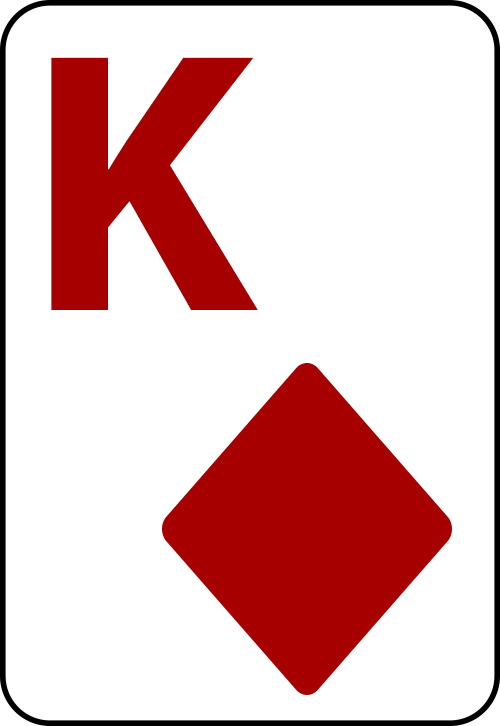
<style>
.page{position:relative;width:500px;height:726px;background:#ffffff}
.page>*{position:absolute;margin:0}
.t1{font:373.7px "MyriadPro-Bold";color:#a70000}
</style>
<div class="page">
<p class="t1" style="left:51px;top:57px;width:207px;height:253px">K</p>
</div>
